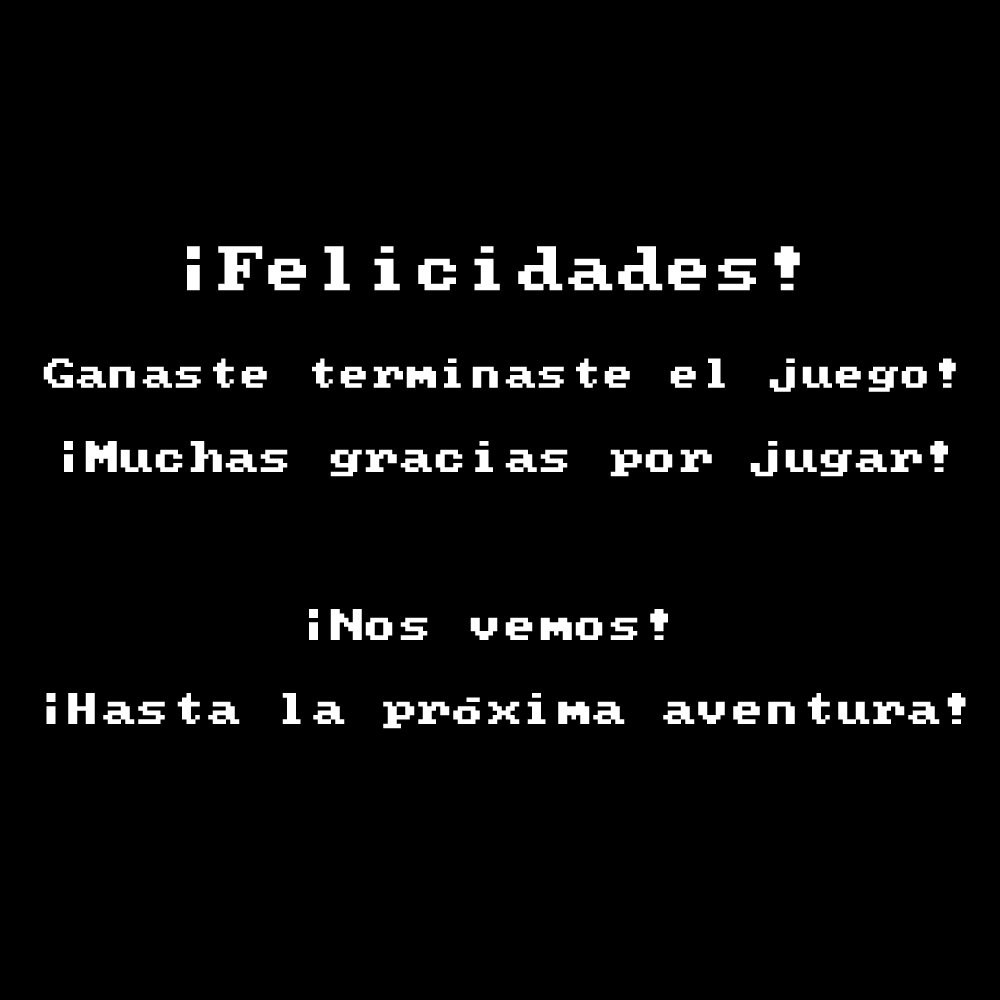
<style>
.page{position:relative;width:1000px;height:1000px;background:#000000}
.page>*{position:absolute;margin:0}
.t1{font:35px "PCSeniorReg";color:#ffffff}
.t2{font:50px "PCSeniorReg";color:#ffffff}
.t3{font:33px "PCSeniorReg";color:#ffffff}
</style>
<div class="page">
<p class="t1" style="left:43px;top:246px;width:923px;height:483px;text-align:center"><span class="t2">¡Felicidades! <br><br><br></span><span class="t3">Ganaste terminaste el juego!<br></span><br>¡Muchas gracias por jugar!<br><br><br><br>¡Nos vemos! <br><br>¡Hasta la próxima aventura!</p>
</div>
